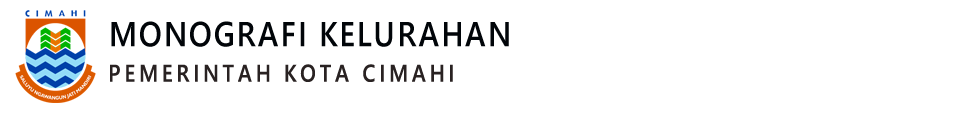
<style>
.page{position:relative;width:960px;height:116px;background:#ffffff}
.page>*{position:absolute;margin:0}
.t1{font:34.7px "SegoeUI-Semibold";letter-spacing:0.06em;color:#090909;scale:0.88 1}
.t2{font:24.2px "SegoeUI-Semibold";letter-spacing:0.18em;color:#292222;scale:0.86 1}
</style>
<div class="page">
<p class="t1" style="left:111px;top:21px;width:398px;height:26px">MONOGRAFI KELURAHAN</p>
<p class="t2" style="left:110px;top:64px;width:343px;height:18px">PEMERINTAH KOTA CIMAHI</p>
</div>
